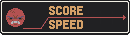
<style>
.page{position:relative;width:130px;height:35px;background:#212123}
.page>*{position:absolute;margin:0}
.t1{font:16px "Born2bSportyFS";color:#d3a068}
</style>
<div class="page">
<p class="t1" style="left:49px;top:6px;width:34px;height:9px">SCORE</p>
<p class="t1" style="left:49px;top:20px;width:34px;height:9px">SPEED</p>
</div>
